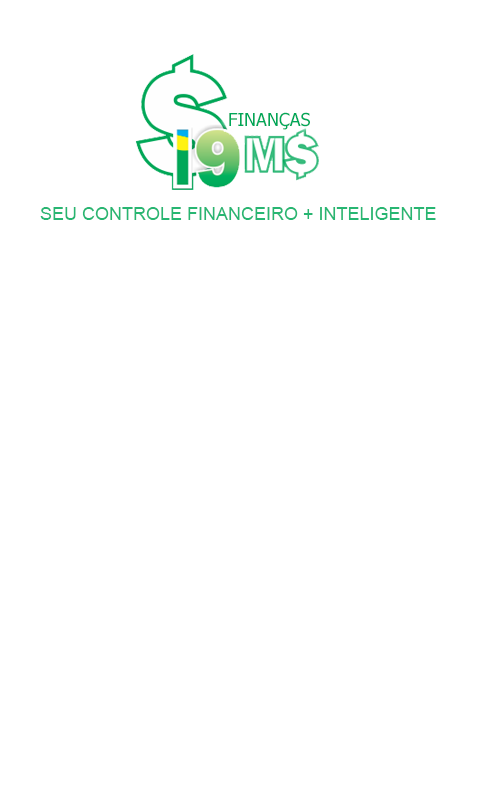
<style>
.page{position:relative;width:480px;height:800px;background:#ffffff}
.page>*{position:absolute;margin:0}
.t1{font:18px "Tahoma";color:#00a859}
.t2{font:18px "ArialMT";color:#27b672}
</style>
<div class="page">
<p class="t1" style="left:229px;top:112px;width:81px;height:18px">FINANÇAS</p>
<p class="t2" style="left:40px;top:207px;width:396px;height:13px">SEU CONTROLE FINANCEIRO + INTELIGENTE</p>
</div>
